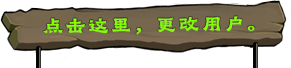
<style>
.page{position:relative;width:291px;height:68px;background:#ffffff}
.page>*{position:absolute;margin:0}
.t1{font:20px "GraveBustedStoneLishuSCRoughlyC";letter-spacing:0.06em;color:#82ff05;scale:1.18 1}
</style>
<div class="page">
<p class="t1" style="left:43px;top:16px;width:212px;height:19px;rotate:-1deg">点击这里，更改用户。</p>
</div>
